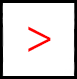
<style>
.page{position:relative;width:77px;height:79px;background:#ffffff}
.page>*{position:absolute;margin:0}
.t1{font:48px "MyriadPro-Regular";color:#ff0000}
</style>
<div class="page">
<p class="t1" style="left:28px;top:26px;width:23px;height:26px">&gt;</p>
</div>
